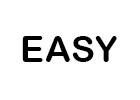
<style>
.page{position:relative;width:140px;height:100px;background:#ffffff}
.page>*{position:absolute;margin:0}
.t1{font:36px "ArialRoundedMTBold";letter-spacing:0.01em;color:#000000}
</style>
<div class="page">
<p class="t1" style="left:22px;top:36px;width:95px;height:26px">EASY</p>
</div>
